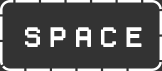
<style>
.page{position:relative;width:162px;height:71px;background:#333333}
.page>*{position:absolute;margin:0}
.t1{font:25px "PixelSplitter-Bold";color:#ffffff}
</style>
<div class="page">
<p class="t1" style="left:25px;top:27px;width:117px;height:20px">S P A C E</p>
</div>
